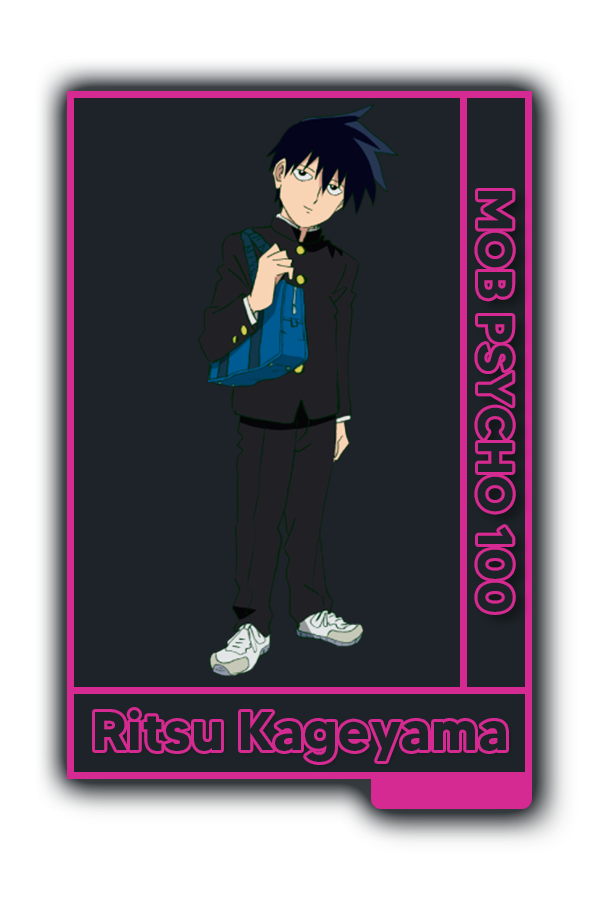
<style>
.page{position:relative;width:600px;height:900px;background:#1d2328}
.page>*{position:absolute;margin:0}
.t1{font:48.8px "MADETOMMY-Bold";color:#1d2328}
.t2{font:54.6px "MADETOMMY-Bold";color:#1d2328}
</style>
<div class="page">
<p class="t1" style="left:477px;top:191px;width:36px;height:421px;rotate:90deg">MOB PSYCHO 100</p>
<p class="t2" style="left:95px;top:710px;width:411px;height:52px">Ritsu Kageyama</p>
</div>
